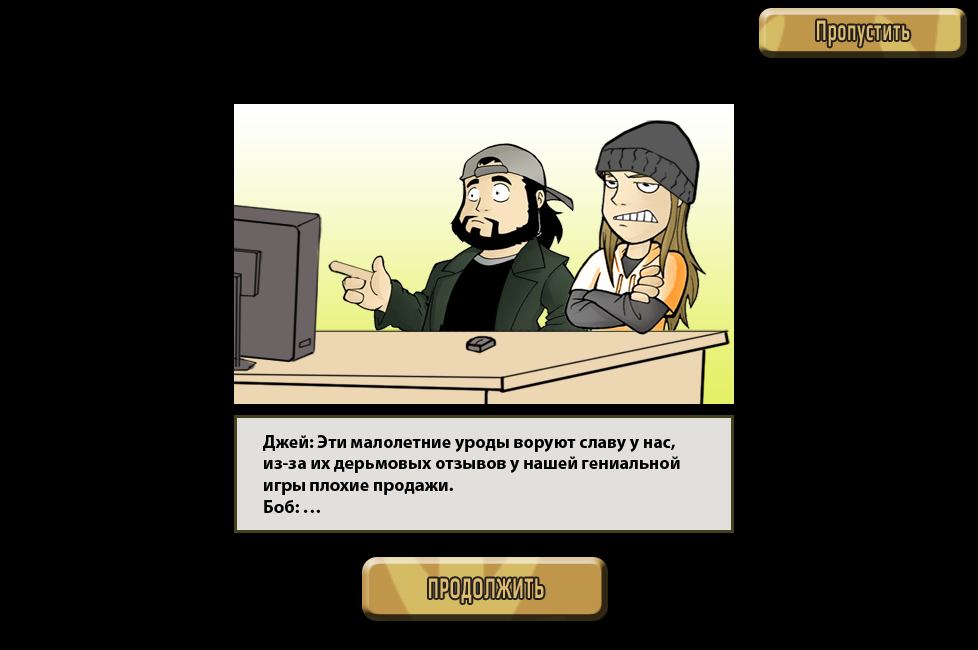
<style>
.page{position:relative;width:978px;height:650px;background:#000000}
.page>*{position:absolute;margin:0}
.t1{font:30px "Play-Bold";letter-spacing:0.06em;color:#e1bc70;scale:0.49 1}
.t2{font:18px "MyriadPro-Bold";color:#000000}
</style>
<div class="page">
<p class="t1" style="left:817px;top:20px;width:93px;height:27px">Пропустить</p>
<p class="t2" style="left:263px;top:435px;width:417px;height:78px">Джей: Эти малолетние уроды воруют славу у нас, из-за их дерьмовых отзывов у нашей гениальной игры плохие продажи.<br>Боб: …</p>
<p class="t1" style="left:429px;top:578px;width:115px;height:25px">ПРОДОЛЖИТЬ</p>
</div>
